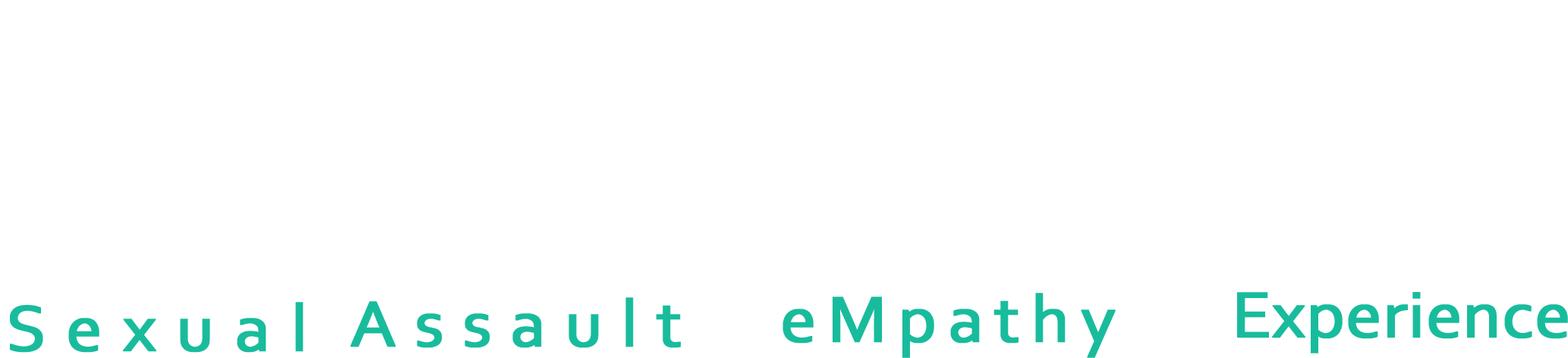
<style>
.page{position:relative;width:1568px;height:358px;background:#ffffff}
.page>*{position:absolute;margin:0}
.t1{font:68.3px "Corbel";letter-spacing:-0.05em;color:#18bc9c;font-weight:bold;scale:1.06 1}
</style>
<div class="page">
<p class="t1" style="left:782px;top:293px;width:334px;height:65px">eMpathy</p>
<p class="t1" style="left:1237px;top:292px;width:331px;height:62px">Experience</p>
<p class="t1" style="left:10px;top:302px;width:294px;height:51px">Sexual</p>
<p class="t1" style="left:350px;top:298px;width:331px;height:50px">Assault</p>
</div>
